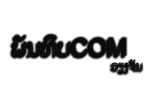
<style>
.page{position:relative;width:145px;height:97px;background:#ffffff}
.page>*{position:absolute;margin:0}
.t1{font:24px "Phetsarath-OT(Modified_28_04_14)";color:#0d0d0d}
.t2{font:12px "Phetsarath-OT(Modified_28_04_14)";color:#0d0d0d}
</style>
<div class="page">
<p class="t1" style="left:13px;top:34px;width:113px;height:22px">ພັນທິບCOM</p>
<p class="t2" style="left:111px;top:59px;width:32px;height:13px">ວຽງຈັນ</p>
</div>
